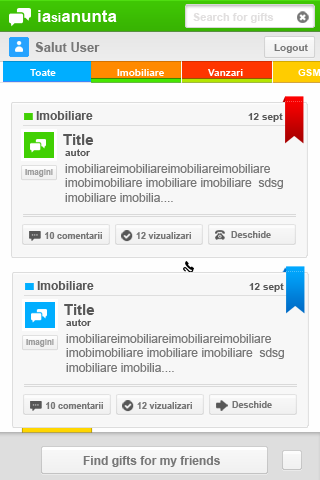
<style>
.page{position:relative;width:320px;height:480px;background:#f7f7f7}
.page>*{position:absolute;margin:0}
.t1{font:17px "Arial-BoldMT";color:#ffffff}
.t2{font:12px "Arial-BoldMT";color:#ffffff}
.t3{font:11px "Arial-BoldMT";color:#e1dfdf}
.t4{font:13px "Arial-BoldMT";color:#777777}
.t5{font:10px "Arial-BoldMT";color:#777777}
.t6{font:10px "Arial-BoldMT";color:#ffffff}
.t7{font:12px "Arial-BoldMT";color:#575757}
.t8{font:10px "Arial-BoldMT";color:#575757}
.t9{font:15px "Arial-BoldMT";color:#575757}
.t10{font:8px "Arial-BoldMT";color:#9d9d9d}
.t11{font:12px "ArialMT";color:#777777}
.t12{font:9px "Arial-BoldMT";color:#777777}
.t13{font:12px "Arial-BoldMT";color:#777777}
</style>
<div class="page">
<p class="t1" style="left:38px;top:10px;width:79px;height:12px">ia<span class="t2">si</span>anunta</p>
<p class="t3" style="left:193px;top:13px;width:81px;height:10px">Search for gifts</p>
<p class="t4" style="left:35px;top:42px;width:65px;height:10px">Salut User</p>
<p class="t5" style="left:274px;top:44px;width:34px;height:9px">Logout</p>
<p class="t6" style="left:30px;top:69px;width:26px;height:7px">Toate</p>
<p class="t6" style="left:117px;top:69px;width:47px;height:7px">Imobiliare</p>
<p class="t6" style="left:208px;top:69px;width:35px;height:7px">Vanzari</p>
<p class="t6" style="left:298px;top:69px;width:23px;height:7px">GSM</p>
<p class="t7" style="left:36px;top:111px;width:57px;height:9px">Imobiliare</p>
<p class="t8" style="left:248px;top:113px;width:35px;height:9px">12 sept</p>
<p class="t9" style="left:63px;top:134px;width:31px;height:11px">Title</p>
<p class="t8" style="left:65px;top:149px;width:25px;height:7px">autor</p>
<p class="t10" style="left:25px;top:169px;width:28px;height:8px">Imagini</p>
<p class="t11" style="left:65px;top:164px;width:218px;height:38px">imobiliareimobiliareimobiliareimobiliare <br>imobimobiliare imobiliare imobiliare  sdsg <br>imobiliare imobilia....</p>
<p class="t12" style="left:45px;top:232px;width:57px;height:7px">10 comentarii</p>
<p class="t12" style="left:136px;top:232px;width:55px;height:7px">12 vizualizari</p>
<p class="t12" style="left:231px;top:231px;width:40px;height:7px">Deschide</p>
<p class="t7" style="left:37px;top:281px;width:57px;height:9px">Imobiliare</p>
<p class="t8" style="left:249px;top:283px;width:35px;height:9px">12 sept</p>
<p class="t9" style="left:64px;top:304px;width:31px;height:11px">Title</p>
<p class="t8" style="left:66px;top:319px;width:25px;height:7px">autor</p>
<p class="t10" style="left:26px;top:339px;width:28px;height:8px">Imagini</p>
<p class="t11" style="left:66px;top:334px;width:218px;height:38px">imobiliareimobiliareimobiliareimobiliare <br>imobimobiliare imobiliare imobiliare  sdsg <br>imobiliare imobilia....</p>
<p class="t12" style="left:232px;top:401px;width:40px;height:7px">Deschide</p>
<p class="t12" style="left:46px;top:402px;width:57px;height:7px">10 comentarii</p>
<p class="t12" style="left:137px;top:402px;width:55px;height:7px">12 vizualizari</p>
<p class="t13" style="left:83px;top:456px;width:137px;height:11px">Find gifts for my friends</p>
</div>
